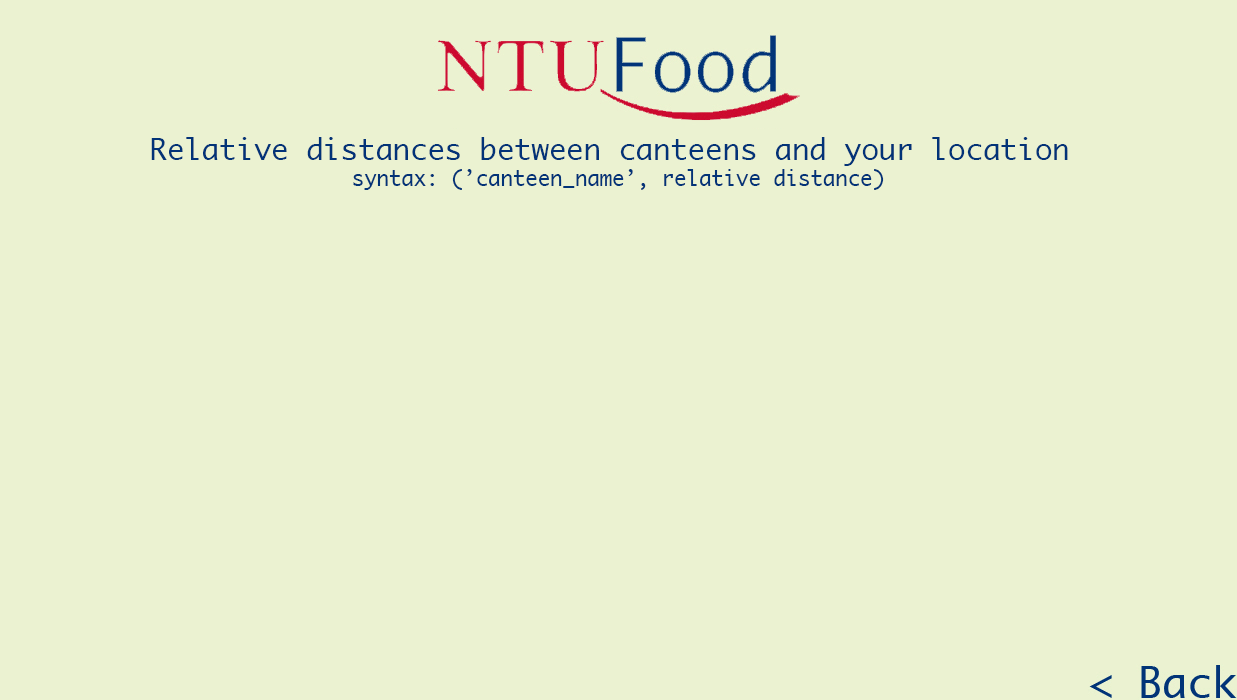
<style>
.page{position:relative;width:1237px;height:700px;background:#ebf2d1}
.page>*{position:absolute;margin:0}
.t1{font:29.2px/33.3px "Monaco";letter-spacing:-0.005em;color:#023378}
.t2{font:20.8px/33.3px "Monaco";letter-spacing:-0.005em;color:#023378}
</style>
<div class="page">
<p class="t1" style="left:151px;top:137px;width:917px;height:53px;text-align:center">Relative distances between canteens and your location <br><span class="t2">syntax: (’canteen_name’, relative distance)</span></p>
</div>
